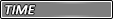
<style>
.page{position:relative;width:113px;height:19px;background:#7f7f7f}
.page>*{position:absolute;margin:0}
.t1{font:13.8px "Calibri-Italic";color:#ffffff;font-weight:bold}
</style>
<div class="page">
<p class="t1" style="left:5px;top:5px;width:30px;height:10px">TIME</p>
</div>
